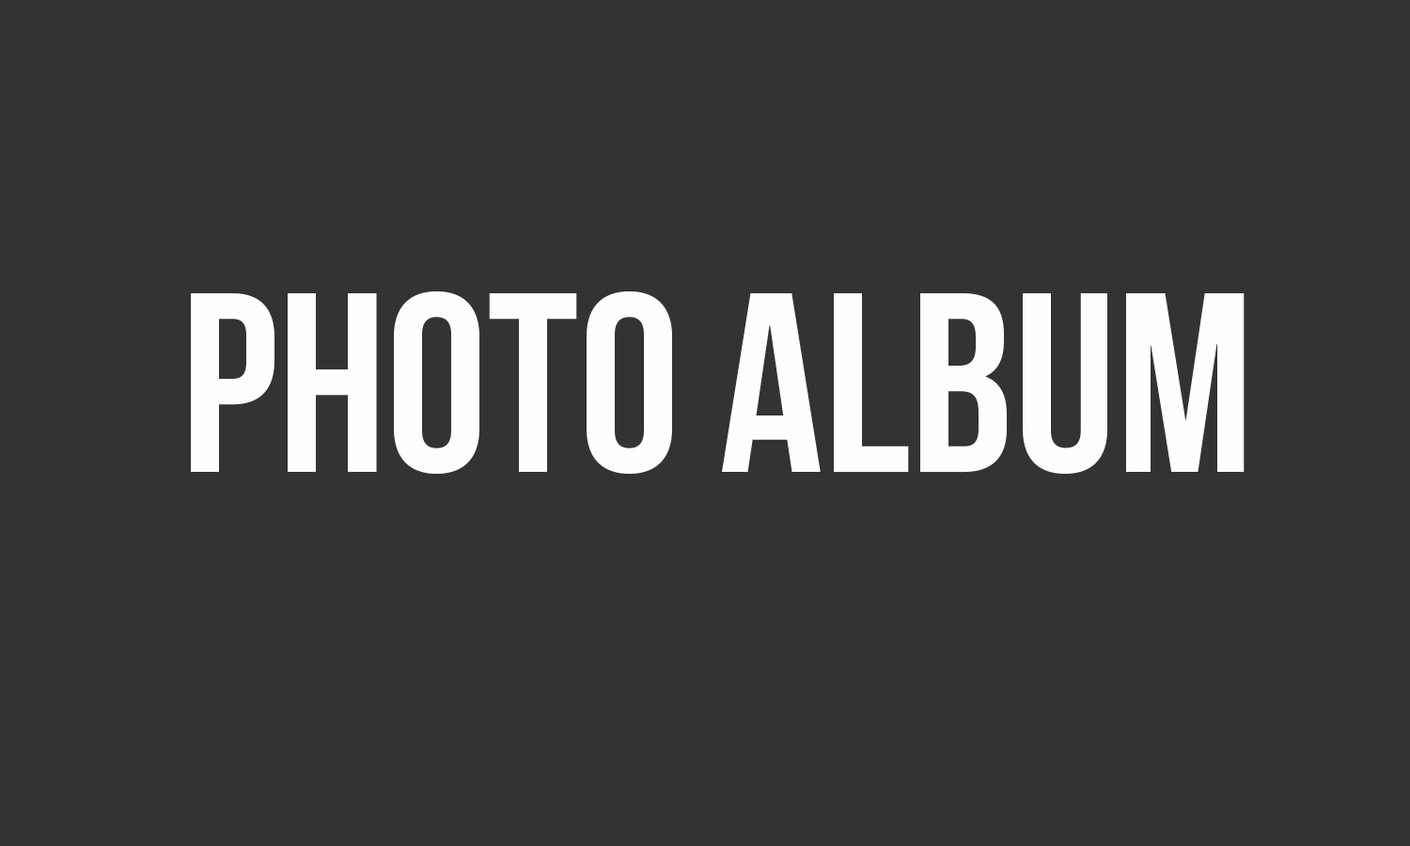
<style>
.page{position:relative;width:1410px;height:846px;background:#333333}
.page>*{position:absolute;margin:0}
.t1{font:255.6px "BebasNeue";color:#fefefe}
</style>
<div class="page">
<p class="t1" style="left:191px;top:291px;width:1053px;height:184px">photo album</p>
</div>
